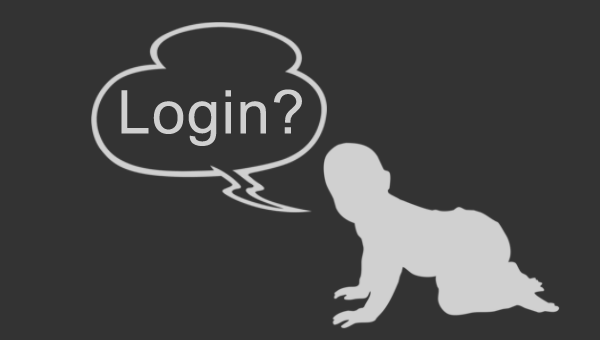
<style>
.page{position:relative;width:600px;height:340px;background:#333333}
.page>*{position:absolute;margin:0}
.t1{font:60px "ArialMT";letter-spacing:0.025em;color:#d0d0d0}
</style>
<div class="page">
<p class="t1" style="left:121px;top:89px;width:181px;height:57px">Login?</p>
</div>
